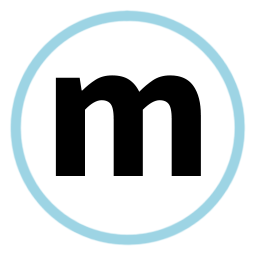
<style>
.page{position:relative;width:256px;height:256px;background:#ffffff}
.page>*{position:absolute;margin:0}
.t1{font:197.7px "SourceSansPro-Bold";color:#000000}
</style>
<div class="page">
<p class="t1" style="left:55px;top:75px;width:146px;height:101px">m</p>
</div>
